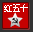
<style>
.page{position:relative;width:33px;height:32px;background:#c50000}
.page>*{position:absolute;margin:0}
.t1{font:10.4px "SimSun";letter-spacing:-0.25em;color:#ffffff}
</style>
<div class="page">
<p class="t1" style="left:4px;top:4px;width:24px;height:8px">红五十</p>
</div>
